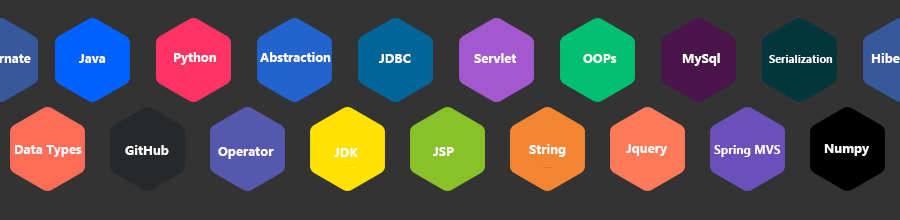
<style>
.page{position:relative;width:900px;height:220px;background:#333333}
.page>*{position:absolute;margin:0}
.t1{font:13px "MicrosoftNewTaiLue-Bold";color:#fefbfb}
.t2{font:11px "MicrosoftNewTaiLue-Bold";color:#fefbfb}
.t3{font:12px "MicrosoftNewTaiLue-Bold";color:#fefbfb}
</style>
<div class="page">
<p class="t1" style="left:79px;top:54px;width:27px;height:9px">Java</p>
<p class="t1" style="left:174px;top:52px;width:42px;height:13px">Python</p>
<p class="t1" style="left:260px;top:52px;width:71px;height:10px">Abstraction</p>
<p class="t1" style="left:379px;top:54px;width:32px;height:9px">JDBC</p>
<p class="t1" style="left:474px;top:53px;width:43px;height:10px">Servlet</p>
<p class="t1" style="left:583px;top:54px;width:34px;height:9px">OOPs</p>
<p class="t1" style="left:682px;top:53px;width:38px;height:13px">MySql</p>
<p class="t2" style="left:769px;top:55px;width:64px;height:8px">Serialization</p>
<p class="t1" style="left:15px;top:145px;width:67px;height:12px">Data Types</p>
<p class="t1" style="left:125px;top:145px;width:44px;height:10px">GitHub</p>
<p class="t1" style="left:218px;top:147px;width:56px;height:12px">Operator</p>
<p class="t1" style="left:334px;top:148px;width:24px;height:9px">JDK</p>
<p class="t1" style="left:433px;top:147px;width:21px;height:9px">JSP</p>
<p class="t1" style="left:529px;top:144px;width:37px;height:13px">String</p>
<p class="t1" style="left:626px;top:144px;width:41px;height:12px">Jquery</p>
<p class="t3" style="left:714px;top:145px;width:67px;height:12px">Spring MVS</p>
<p class="t1" style="left:824px;top:144px;width:45px;height:12px">Numpy</p>
</div>
